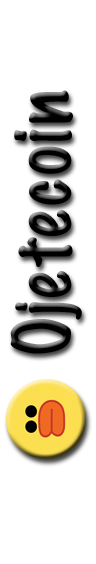
<style>
.page{position:relative;width:96px;height:564px;background:#ffffff}
.page>*{position:absolute;margin:0}
.t1{font:72px "MarkerFelt-Thin"}
</style>
<div class="page">
<p class="t1" style="left:10px;top:90px;width:72px;height:264px;rotate:-90deg">Ojetecoin</p>
</div>
